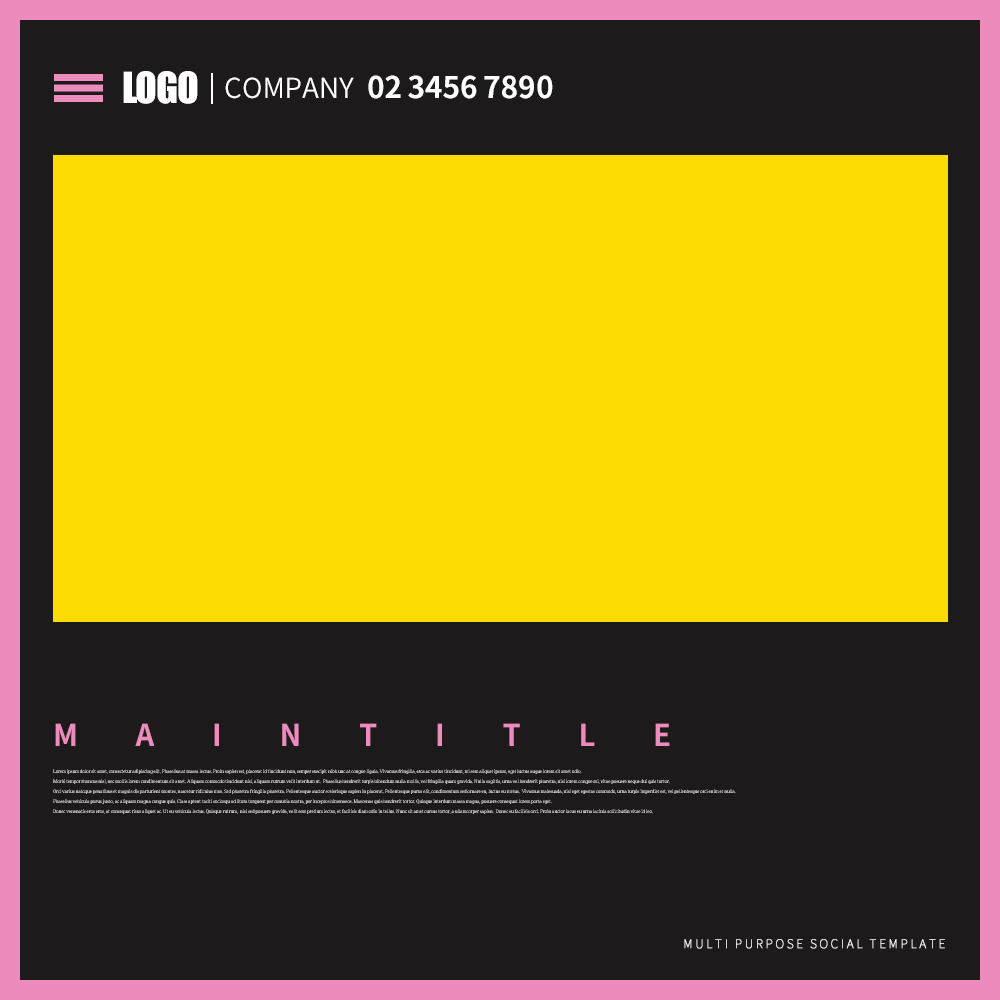
<style>
.page{position:relative;width:1000px;height:1000px;background:#1c1a1b}
.page>*{position:absolute;margin:0}
.t1{font:39.5px "Impact";letter-spacing:-0.025em;color:#ffffff}
.t2{font:27.6px "SourceHanSansKR-Normal";color:#ffffff}
.t3{font:29.8px "SourceHanSansKR-Bold";color:#ffffff}
.t4{font:30px "SourceHanSansKR-Bold";letter-spacing:2em;color:#ec8bbc;scale:0.96 1}
.t5{font:5px/10px "IropkeBatangM";letter-spacing:-0.04em}
.t6{font:12px "SourceHanSansKR-ExtraLight";letter-spacing:0.2em;color:#ffffff;font-weight:bold}
</style>
<div class="page">
<p class="t1" style="left:123px;top:71px;width:75px;height:33px">LOGO</p>
<p class="t2" style="left:225px;top:77px;width:129px;height:22px">COMPANY</p>
<p class="t3" style="left:368px;top:75px;width:185px;height:24px">02 3456 7890</p>
<p class="t4" style="left:55px;top:723px;width:615px;height:23px">MAINTITLE</p>
<p class="t5" style="left:53px;top:769px;width:683px;height:45px">Lorem ipsum dolor sit amet, consectetur adipiscing elit. Phasellus at massa lectus. Proin sapien est, placerat id tincidunt non, semper suscipit nibh unc at congue ligula. Vivamus fringilla, eros ac varius tincidunt, mi sem aliquet ipsum, eget luctus augue lorem sit amet odio. <br>Morbi tempor rhoncus nisl, nec mollis lorem condimentum sit amet. Aliquam commodo tincidunt nisi, aliquam rutrum velit interdum ut.  Phasellus hendrerit turpis bibendum nulla mollis, vel fringilla quam gravida. Nulla sagittis, urna vel hendrerit pharetra, nisi lorem congue mi, vitae posuere neque dui quis tortor. <br>Orci varius natoque penatibus et magnis dis parturient montes, nascetur ridiculus mus. Sed pharetra fringilla pharetra. Pellentesque auctor scelerisque sapien in placerat. Pellentesque purus elit, condimentum sed ornare eu, luctus eu metus.  Vivamus malesuada, nisi eget egestas commodo, urna turpis imperdiet est, vel pellentesque orci enim et nulla.<br>Phasellus vehicula purus justo, ac aliquam magna congue quis. Class aptent taciti sociosqu ad litora torquent per conubia nostra, per inceptos himenaeos. Maecenas quis hendrerit tortor. Quisque interdum massa magna, posuere consequat lorem porta eget. <br>Donec venenatis eros eros, at consequat risus aliquet ac. Ut eu vehicula lectus. Quisque rutrum,  nisi sed posuere gravida, velit sem pretium lectus, et facilisis diam odio in tellus. Nunc sit amet cursus tortor, a ullamcorper sapien.  Donec eu facilisis orci. Proin auctor lacus eu urna lacinia sollicitudin vitae id leo.</p>
<p class="t6" style="left:684px;top:939px;width:261px;height:10px">MULTI PURPOSE SOCIAL TEMPLATE</p>
</div>
